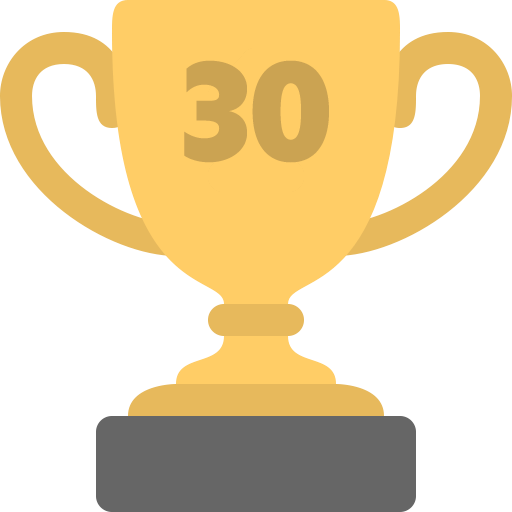
<style>
.page{position:relative;width:512px;height:512px;background:#ffffff}
.page>*{position:absolute;margin:0}
.t1{font:148.2px "Sen-ExtraBold";letter-spacing:-0.075em;color:#cca352}
</style>
<div class="page">
<p class="t1" style="left:184px;top:60px;width:145px;height:103px">30</p>
</div>
